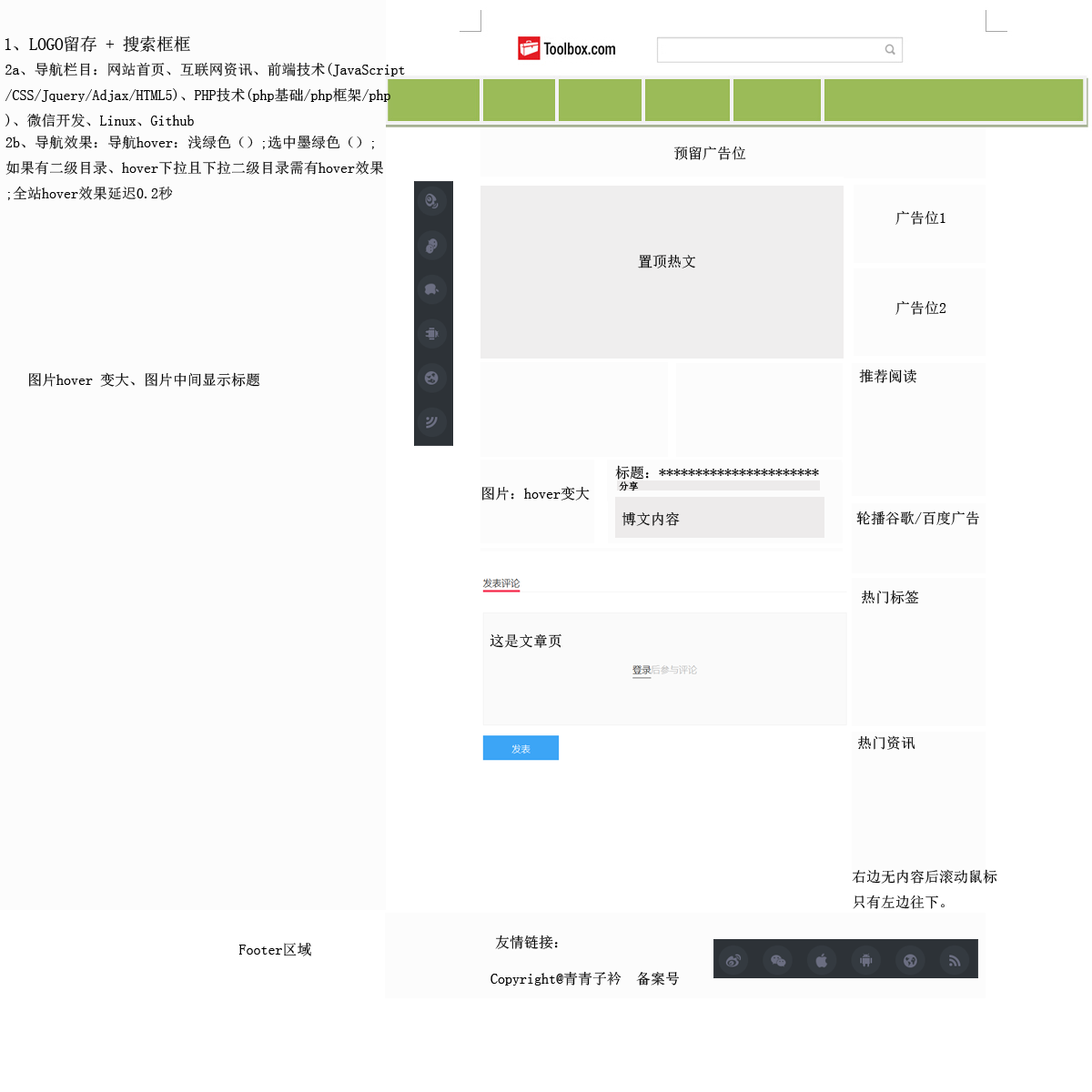
<style>
.page{position:relative;width:1092px;height:1092px;background:#fcfcfc}
.page>*{position:absolute;margin:0}
.t1{font:17px "SimSun";color:#040404}
.t2{font:14.6px "SimSun";color:#040404}
.t3{font:14.6px "SimSun";color:#000000}
.t4{font:14.6px "SimSun";color:#010101}
.t5{font:9.7px "SimSun";color:#000000}
</style>
<div class="page">
<p class="t1" style="left:5px;top:35px;width:185px;height:17px">1、LOGO留存 + 搜索框框</p>
<p class="t2" style="left:5px;top:62px;width:400px;height:65px">2a、导航栏目：网站首页、互联网资讯、前端技术(JavaScript<br>/CSS/Jquery/Adjax/HTML5)、PHP技术(php基础/php框架/php<br>)、微信开发、Linux、Github</p>
<p class="t2" style="left:5px;top:135px;width:378px;height:65px">2b、导航效果：导航hover：浅绿色（）;选中墨绿色（）;<br>如果有二级目录、hover下拉且下拉二级目录需有hover效果<br>;全站hover效果延迟0.2秒</p>
<p class="t3" style="left:674px;top:146px;width:72px;height:14px">预留广告位</p>
<p class="t4" style="left:895px;top:210px;width:50px;height:15px">广告位1</p>
<p class="t4" style="left:638px;top:254px;width:57px;height:14px">置顶热文</p>
<p class="t4" style="left:895px;top:300px;width:51px;height:15px">广告位2</p>
<p class="t3" style="left:29px;top:372px;width:231px;height:15px">图片hover 变大、图片中间显示标题</p>
<p class="t4" style="left:859px;top:369px;width:57px;height:14px">推荐阅读</p>
<p class="t3" style="left:615px;top:465px;width:204px;height:15px">标题：**********************</p>
<p class="t3" style="left:482px;top:486px;width:108px;height:14px">图片：hover变大</p>
<p class="t5" style="left:619px;top:481px;width:20px;height:10px">分享</p>
<p class="t3" style="left:622px;top:511px;width:58px;height:15px">博文内容</p>
<p class="t3" style="left:856px;top:511px;width:123px;height:14px">轮播谷歌/百度广告</p>
<p class="t3" style="left:862px;top:590px;width:57px;height:14px">热门标签</p>
<p class="t3" style="left:490px;top:633px;width:71px;height:15px">这是文章页</p>
<p class="t3" style="left:858px;top:735px;width:57px;height:15px">热门资讯</p>
<p class="t3" style="left:852px;top:869px;width:145px;height:40px">右边无内容后滚动鼠标<br>只有左边往下。</p>
<p class="t3" style="left:495px;top:935px;width:63px;height:14px">友情链接：</p>
<p class="t3" style="left:238px;top:943px;width:73px;height:13px">Footer区域</p>
<p class="t3" style="left:490px;top:971px;width:189px;height:15px">Copyright@青青子衿  备案号</p>
</div>
